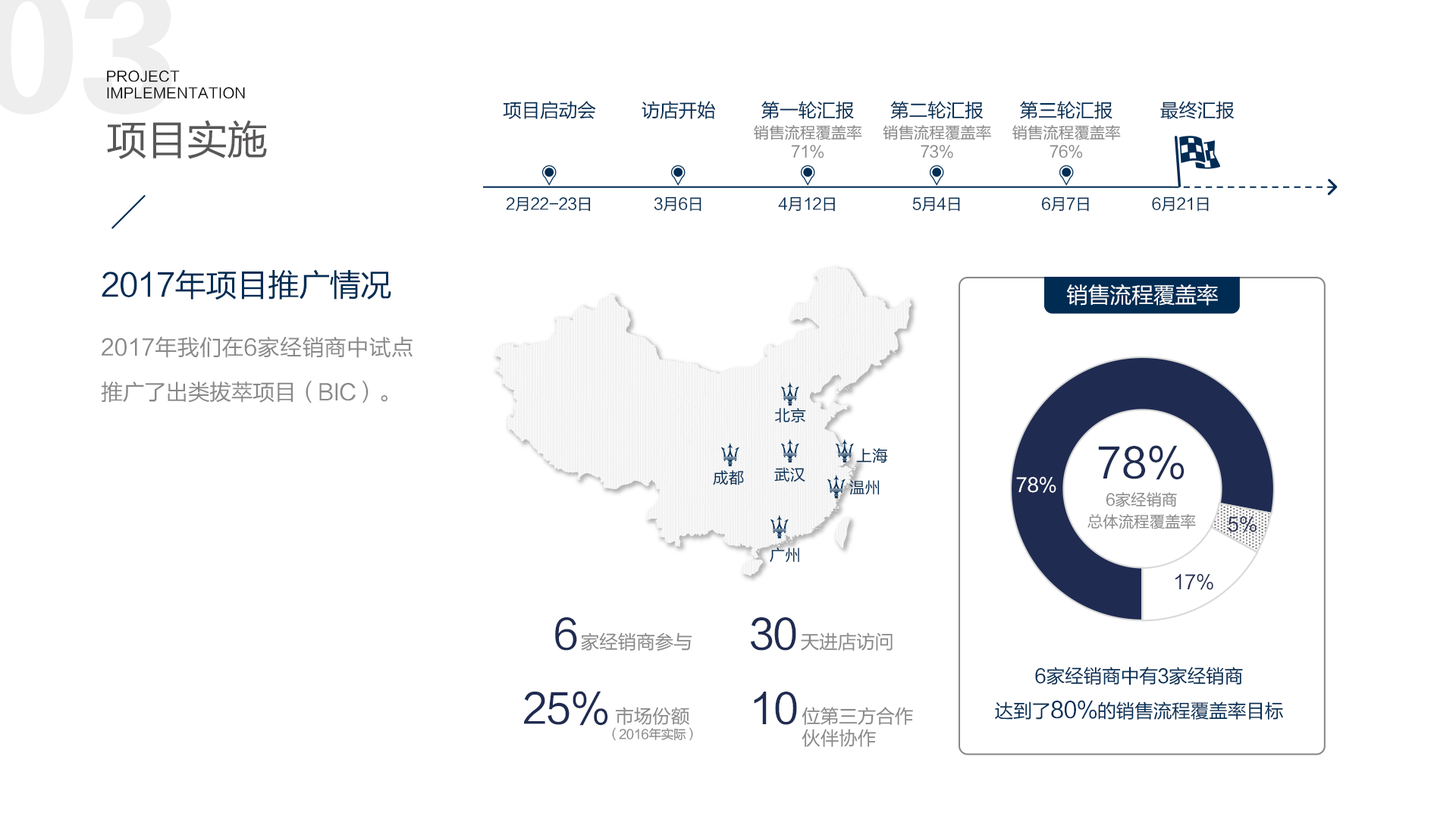
<style>
.page{position:relative;width:1456px;height:819px;background:#ffffff}
.page>*{position:absolute;margin:0}
.t1{font:14.1px "FZLTHJW--GB1-0";letter-spacing:0.02em;color:#000000}
.t2{font:19px "FZLTHJW--GB1-0";letter-spacing:-0.02em;color:#002c54}
.t3{font:41.1px "FZLTHJW--GB1-0";letter-spacing:-0.02em;color:#595757}
.t4{font:15.8px/19px "FZLTHJW--GB1-0";letter-spacing:-0.02em;color:#888888}
.t5{font:15.8px "FZLTHJW--GB1-0";letter-spacing:-0.02em;color:#002c54}
.t6{font:31.6px "FZLTHJW--GB1-0";letter-spacing:-0.02em;color:#002c54}
.t7{font:22.1px "FZLTHJW--GB1-0";letter-spacing:-0.02em;color:#ffffff}
.t8{font:22.1px/44.2px "FZLTHJW--GB1-0";letter-spacing:-0.02em;color:#888888}
.t9{font:15.8px "FZLTHJW--GB1-0";color:#002c54}
.t10{font:41.1px "FZLTHJW--GB1-0";color:#1f2b51}
.t11{font:19px "FZLTHJW--GB1-0";color:#ffffff}
.t12{font:15.8px/22.1px "FZLTHJW--GB1-0";letter-spacing:-0.02em;color:#888888}
.t13{font:19px "FZLTHJW--GB1-0";color:#1f2b51}
.t14{font:41.1px "FZLTHJW--GB1-0";letter-spacing:-0.02em;color:#1f2b51}
.t15{font:19px "FZLTHJW--GB1-0";letter-spacing:-0.02em;color:#888888}
.t16{font:19px/34.8px "FZLTHJW--GB1-0";letter-spacing:-0.02em;color:#002c54}
.t17{font:22.1px/34.8px "FZLTHJW--GB1-0";letter-spacing:-0.02em;color:#002c54}
.t18{font:12.6px/15.8px "FZLTHJW--GB1-0";letter-spacing:-0.02em;color:#888888}
.t19{font:19px/15.8px "FZLTHJW--GB1-0";letter-spacing:-0.02em;color:#888888}
.t20{font:19px/22.1px "FZLTHJW--GB1-0";letter-spacing:-0.02em;color:#888888}
</style>
<div class="page">
<p class="t1" style="left:107px;top:70px;width:138px;height:29px">PROJECT <br>IMPLEMENTATION</p>
<p class="t2" style="left:503px;top:101px;width:93px;height:18px">项目启动会</p>
<p class="t2" style="left:642px;top:101px;width:74px;height:18px">访店开始</p>
<p class="t2" style="left:761px;top:101px;width:93px;height:18px">第一轮汇报</p>
<p class="t2" style="left:890px;top:101px;width:94px;height:18px">第二轮汇报</p>
<p class="t2" style="left:1020px;top:101px;width:92px;height:18px">第三轮汇报</p>
<p class="t2" style="left:1160px;top:101px;width:75px;height:19px">最终汇报</p>
<p class="t3" style="left:107px;top:120px;width:160px;height:39px">项目实施</p>
<p class="t4" style="left:754px;top:124px;width:108px;height:34px;text-align:center">销售流程覆盖率<br>71%</p>
<p class="t4" style="left:883px;top:124px;width:108px;height:34px;text-align:center">销售流程覆盖率<br>73%</p>
<p class="t4" style="left:1012px;top:124px;width:109px;height:34px;text-align:center">销售流程覆盖率<br>76%</p>
<p class="t5" style="left:506px;top:196px;width:85px;height:16px">2月22-23日</p>
<p class="t5" style="left:654px;top:196px;width:47px;height:16px">3月6日</p>
<p class="t5" style="left:778px;top:196px;width:57px;height:16px">4月12日</p>
<p class="t5" style="left:912px;top:196px;width:48px;height:16px">5月4日</p>
<p class="t5" style="left:1041px;top:196px;width:48px;height:16px">6月7日</p>
<p class="t5" style="left:1152px;top:196px;width:57px;height:16px">6月21日</p>
<p class="t6" style="left:102px;top:269px;width:289px;height:31px">2017年项目推广情况</p>
<p class="t7" style="left:1067px;top:284px;width:151px;height:22px">销售流程覆盖率</p>
<p class="t8" style="left:101px;top:337px;width:312px;height:66px;text-align:justify">2017年我们在6家经销商中试点推广了出类拔萃项目（BIC）。</p>
<p class="t9" style="left:775px;top:408px;width:31px;height:15px">北京</p>
<p class="t9" style="left:856px;top:448px;width:32px;height:15px">上海</p>
<p class="t10" style="left:1098px;top:445px;width:87px;height:35px">78%</p>
<p class="t9" style="left:713px;top:470px;width:31px;height:15px">成都</p>
<p class="t9" style="left:774px;top:467px;width:31px;height:15px">武汉</p>
<p class="t9" style="left:849px;top:480px;width:31px;height:15px">温州</p>
<p class="t11" style="left:1016px;top:476px;width:40px;height:17px">78%</p>
<p class="t12" style="left:1087px;top:492px;width:109px;height:37px;text-align:center">6家经销商<br>总体流程覆盖率</p>
<p class="t13" style="left:1228px;top:516px;width:29px;height:16px">5%</p>
<p class="t9" style="left:770px;top:548px;width:29px;height:14px">广州</p>
<p class="t13" style="left:1175px;top:573px;width:38px;height:17px">17%</p>
<p class="t14" style="left:555px;top:617px;width:22px;height:34px">6</p>
<p class="t14" style="left:751px;top:617px;width:45px;height:34px">30</p>
<p class="t15" style="left:581px;top:632px;width:111px;height:19px">家经销商参与</p>
<p class="t15" style="left:801px;top:632px;width:92px;height:19px">天进店访问</p>
<p class="t16" style="left:995px;top:667px;width:288px;height:53px;text-align:center">6家经销商中有3家经销商<br>达到了<span class="t17">80%</span>的销售流程覆盖率目标</p>
<p class="t14" style="left:524px;top:691px;width:84px;height:35px">25%</p>
<p class="t14" style="left:754px;top:692px;width:43px;height:33px">10</p>
<p class="t18" style="left:612px;top:707px;width:81px;height:34px;text-align:center"><span class="t19">市场份额<br></span>（2016年实际）</p>
<p class="t20" style="left:802px;top:707px;width:111px;height:40px">位第三方合作<br>伙伴协作</p>
</div>
